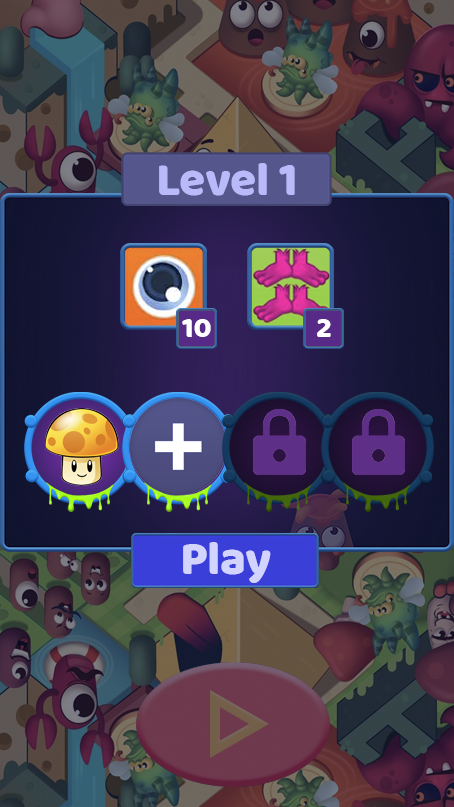
<style>
.page{position:relative;width:454px;height:807px}
.page>*{position:absolute;margin:0}
.t1{font:48px "Baloo-Regular";color:#b9baf9}
.t2{font:30px "Baloo-Regular";color:#ffffff}
.t3{font:48px "Baloo-Regular";color:#d3d4fe}
</style>
<div class="page">
<p class="t1" style="left:159px;top:163px;width:136px;height:33px">Level 1</p>
<p class="t2" style="left:182px;top:319px;width:29px;height:18px">10</p>
<p class="t2" style="left:317px;top:319px;width:14px;height:18px">2</p>
<p class="t3" style="left:183px;top:542px;width:88px;height:41px">Play</p>
</div>
